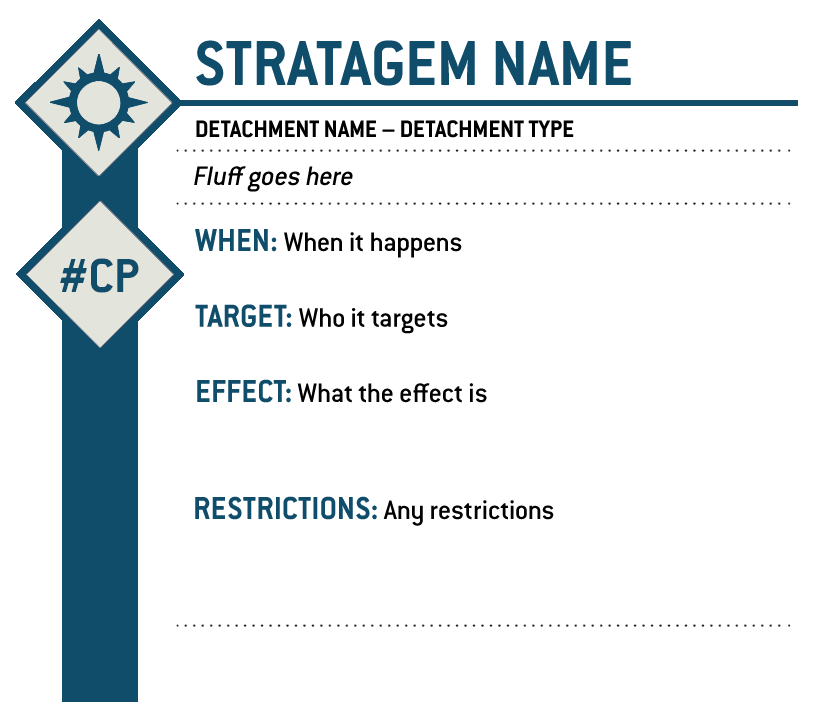
<style>
.page{position:relative;width:840px;height:722px;background:#ffffff}
.page>*{position:absolute;margin:0}
.t1{font:70px "ConduitITC-Bold";color:#0f4d6b;scale:0.95 1}
.t2{font:26.2px "ConduitITC-Bold";color:#000000;scale:0.95 1}
.t3{font:29.2px "ConduitITCMedium";color:#000000;font-style:italic}
.t4{font:29.2px "ConduitITCMedium";color:#000000}
.t5{font:35px "ConduitITC-Bold";color:#0f4d6b;scale:0.95 1}
.t6{font:52.5px "ConduitITC-Bold";color:#0f4d6b}
.t7{font:29.2px "ConduitITCMedium";color:#020202}
</style>
<div class="page">
<p class="t1" style="left:196px;top:40px;width:435px;height:46px">STRATAGEM NAME</p>
<p class="t2" style="left:196px;top:120px;width:378px;height:18px">DETACHMENT NAME – DETACHMENT TYPE</p>
<p class="t3" style="left:194px;top:166px;width:159px;height:26px">Fluff goes here</p>
<p class="t4" style="left:195px;top:229px;width:267px;height:29px"><span class="t5">WHEN: </span>When it happens</p>
<p class="t6" style="left:60px;top:258px;width:79px;height:35px">#CP</p>
<p class="t7" style="left:195px;top:304px;width:253px;height:30px"><span class="t4"><br><br></span><span class="t5">TARGET: </span>Who it targets</p>
<p class="t7" style="left:197px;top:379px;width:290px;height:24px"><span class="t5">EFFECT: </span>What the effect is</p>
<p class="t7" style="left:195px;top:496px;width:359px;height:30px"><span class="t5">RESTRICTIONS: </span>Any restrictions</p>
</div>
